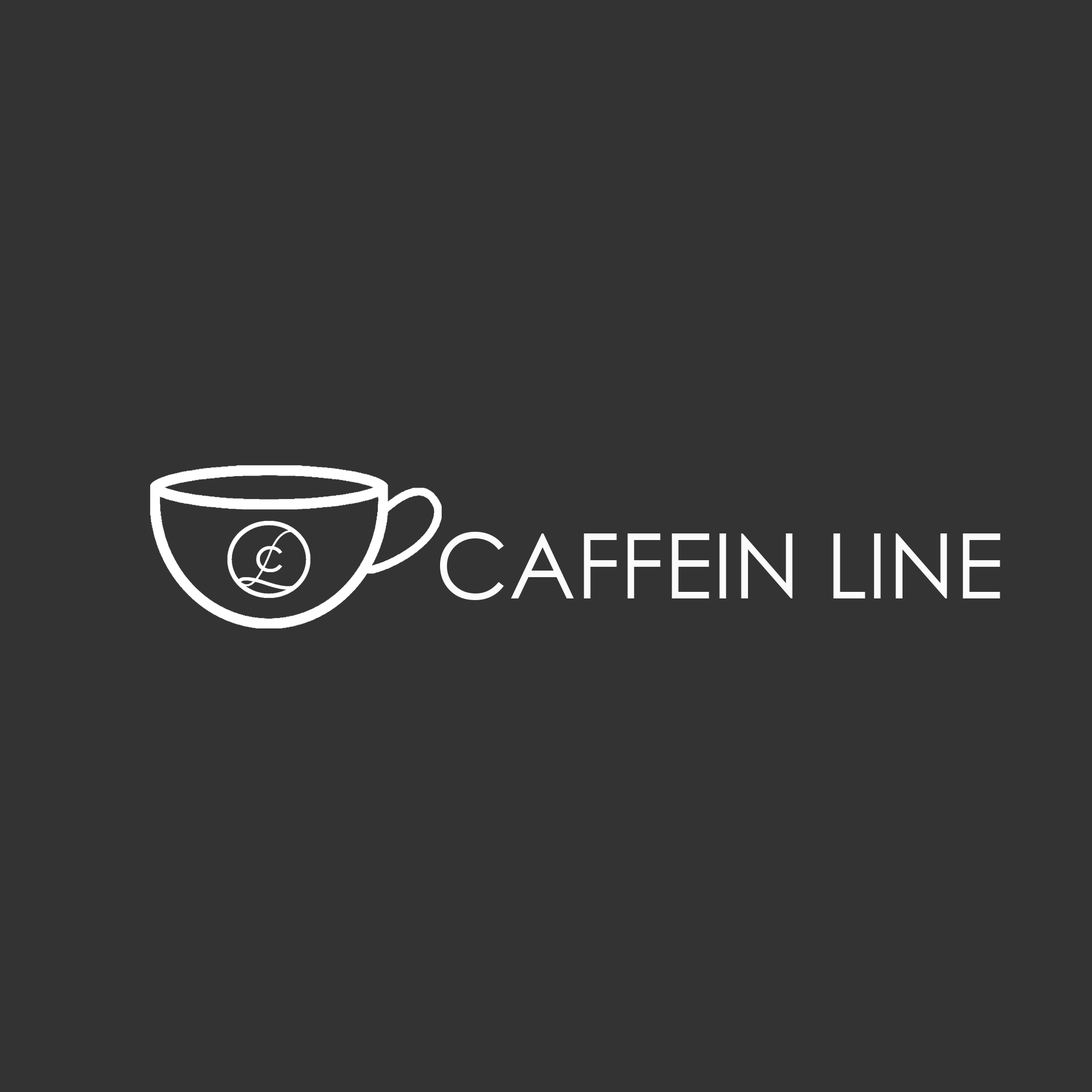
<style>
.page{position:relative;width:1092px;height:1092px;background:#333333}
.page>*{position:absolute;margin:0}
.t1{font:90.7px "CenturyGothic";color:#fbfbfb}
</style>
<div class="page">
<p class="t1" style="left:440px;top:532px;width:560px;height:68px">CAFFEIN LINE</p>
</div>
